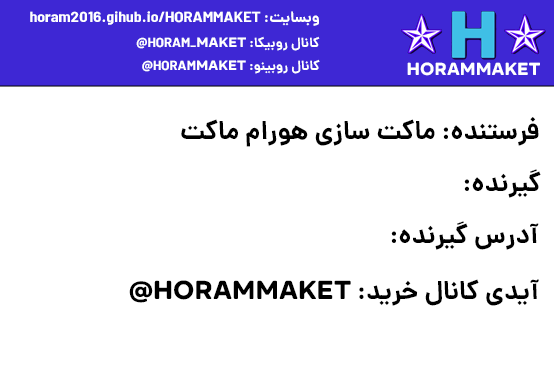
<style>
.page{position:relative;width:554px;height:381px;background:#ffffff}
.page>*{position:absolute;margin:0}
.t1{font:15.3px "dana-bold";color:#ffffff}
.t2{font:13.6px "dana-bold";color:#ffffff}
.t3{font:13.6px "Feather-Bold";color:#ffffff}
.t4{font:17.6px "Feather-Bold";color:#ffffff}
.t5{font:26px "dana-bold";color:#000000}
.t6{font:26px "Feather-Bold";color:#000000}
</style>
<div class="page">
<p class="t1" style="left:30px;top:11px;width:289px;height:15px">وبسایت: horam2016.gihub.io/HORAMMAKET</p>
<p class="t2" style="left:136px;top:36px;width:184px;height:15px">کانال روبیکا: HORAM_<span class="t3">MAKET</span>@</p>
<p class="t2" style="left:142px;top:59px;width:178px;height:15px">کانال روبینو: HORAM<span class="t3">MAKET</span>@</p>
<p class="t4" style="left:407px;top:62px;width:133px;height:14px">HORAMMAKET</p>
<p class="t5" style="left:181px;top:117px;width:358px;height:30px">فرستنده: ماکت سازی هورام ماکت</p>
<p class="t5" style="left:464px;top:169px;width:77px;height:29px">گیرنده:</p>
<p class="t5" style="left:391px;top:221px;width:148px;height:29px">آدرس گیرنده:</p>
<p class="t5" style="left:129px;top:279px;width:410px;height:27px">آیدی کانال خرید: <span class="t6">HORAMMAKET@</span></p>
</div>
